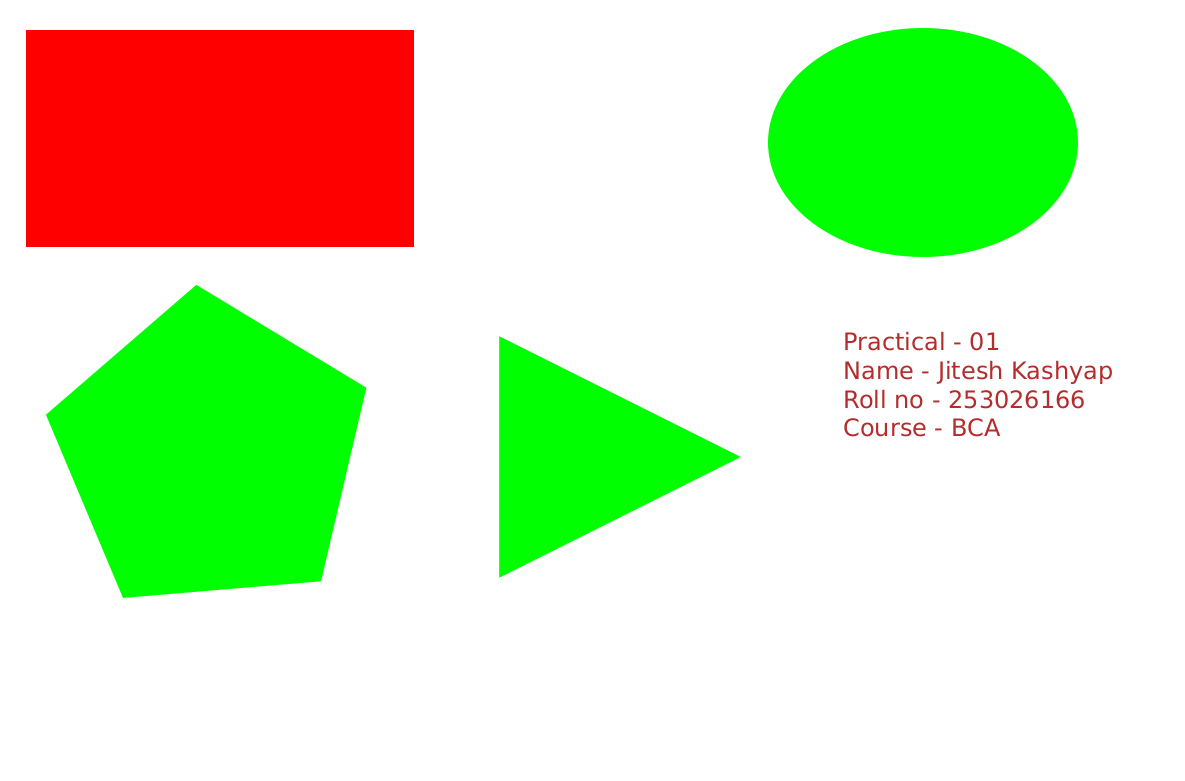
<style>
.page{position:relative;width:1185px;height:781px;background:#ffffff}
.page>*{position:absolute;margin:0}
.t1{font:24px "Arial";color:#b42c2c}
</style>
<div class="page">
<p class="t1" style="left:844px;top:331px;width:268px;height:106px">Practical - 01<br>Name - Jitesh Kashyap<br>Roll no - 253026166<br>Course - BCA</p>
</div>
